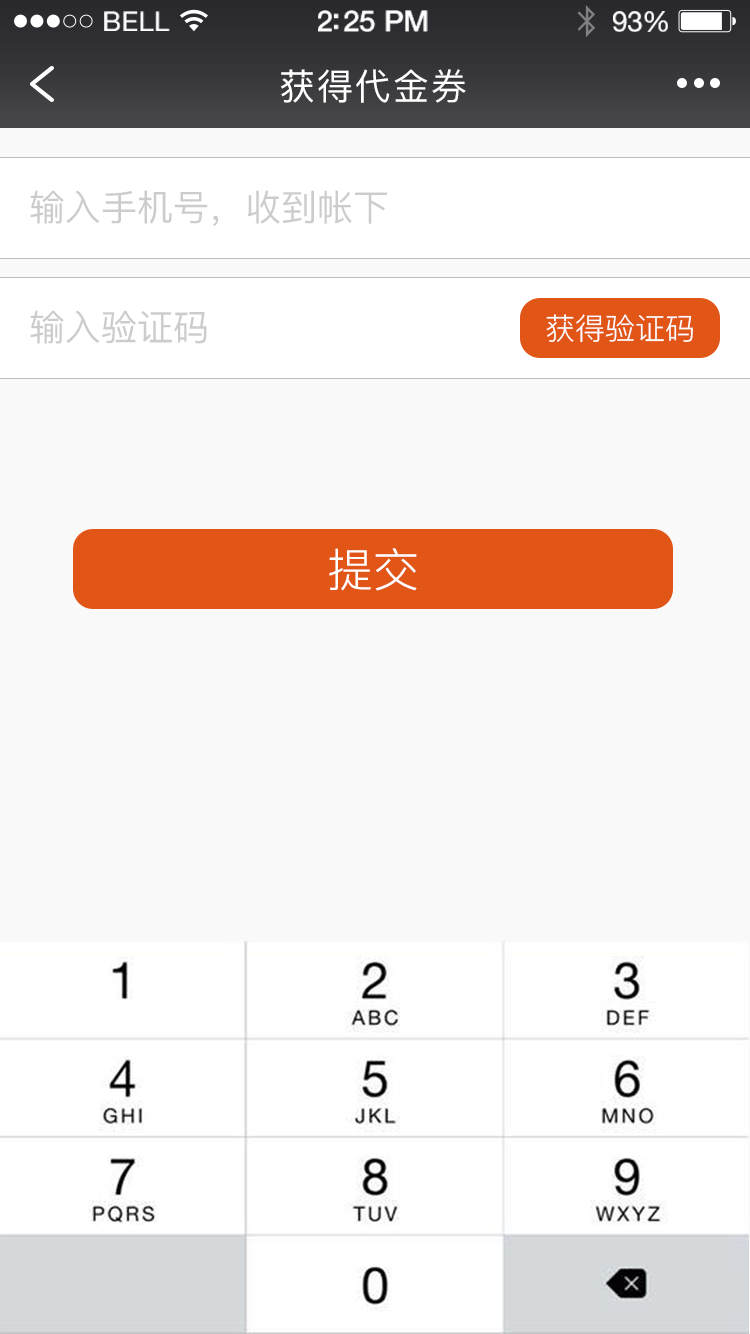
<style>
.page{position:relative;width:750px;height:1334px;background:#f9f9f9}
.page>*{position:absolute;margin:0}
.t1{font:27px "HelveticaNeue";letter-spacing:0.02em;color:#ffffff}
.t2{font:29.4px "HelveticaNeue-Medium";letter-spacing:-0.02em;color:#ffffff}
.t3{font:28.2px "HelveticaNeue";letter-spacing:-0.02em;color:#ffffff}
.t4{font:36px "PingFang-SC-Medium";letter-spacing:0.06em;color:#ffffff}
.t5{font:36px "PingFang-SC-Medium";color:#cccccc}
.t6{font:30px "PingFang-SC-Regular";color:#ffffff}
.t7{font:46px "PingFang-SC-Regular";color:#ffffff}
</style>
<div class="page">
<p class="t1" style="left:104px;top:11px;width:66px;height:20px">BELL</p>
<p class="t2" style="left:318px;top:10px;width:110px;height:22px">2:25 PM</p>
<p class="t3" style="left:613px;top:11px;width:55px;height:21px">93%</p>
<p class="t4" style="left:280px;top:69px;width:186px;height:34px">获得代金券</p>
<p class="t5" style="left:30px;top:190px;width:357px;height:36px">输入手机号，收到帐下</p>
<p class="t5" style="left:30px;top:310px;width:177px;height:34px">输入验证码</p>
<p class="t6" style="left:546px;top:314px;width:147px;height:29px">获得验证码</p>
<p class="t7" style="left:329px;top:548px;width:88px;height:43px">提交</p>
</div>
